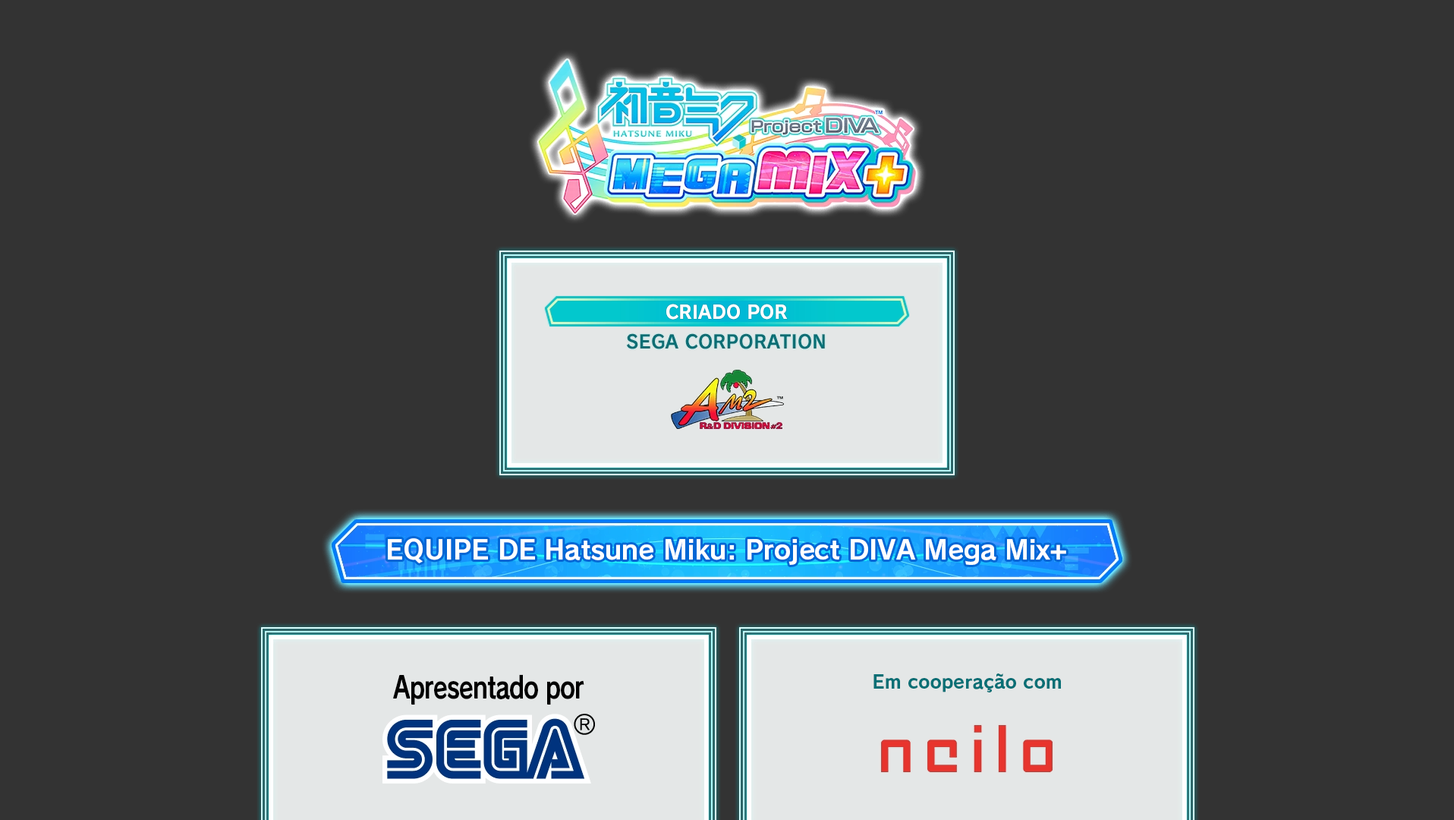
<style>
.page{position:relative;width:1454px;height:820px;background:#333333}
.page>*{position:absolute;margin:0}
.t1{font:18.2px "RodinNTLGPro-B";color:#ffffff}
.t2{font:26.3px "RodinNTLGPro-B";letter-spacing:-0.011em;color:#ffffff}
.t3{font:30.4px "RodinNTLGPro-B";letter-spacing:-0.034em;color:#000000;scale:0.77 1}
.t4{font:18.2px "RodinNTLGPro-B";color:#076f75}
</style>
<div class="page">
<p class="t1" style="left:667px;top:304px;width:121px;height:16px">CRIADO POR</p>
<p class="t2" style="left:388px;top:538px;width:679px;height:27px">EQUIPE DE Hatsune Miku: Project DIVA Mega Mix+</p>
<p class="t3" style="left:393px;top:674px;width:192px;height:30px">Apresentado por</p>
<p class="t4" style="left:874px;top:673px;width:187px;height:19px">Em cooperação com</p>
</div>
